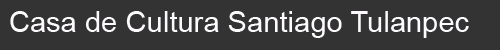
<style>
.page{position:relative;width:500px;height:50px;background:#333333}
.page>*{position:absolute;margin:0}
.t1{font:29.2px "ArialMT";color:#fdfbfe}
</style>
<div class="page">
<p class="t1" style="left:10px;top:11px;width:459px;height:27px">Casa de Cultura Santiago Tulanpec</p>
</div>
